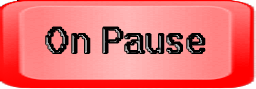
<style>
.page{position:relative;width:256px;height:89px}
.page>*{position:absolute;margin:0}
.t1{font:33.9px "System";color:#050505}
</style>
<div class="page">
<p class="t1" style="left:46px;top:27px;width:159px;height:26px">On Pause</p>
</div>
